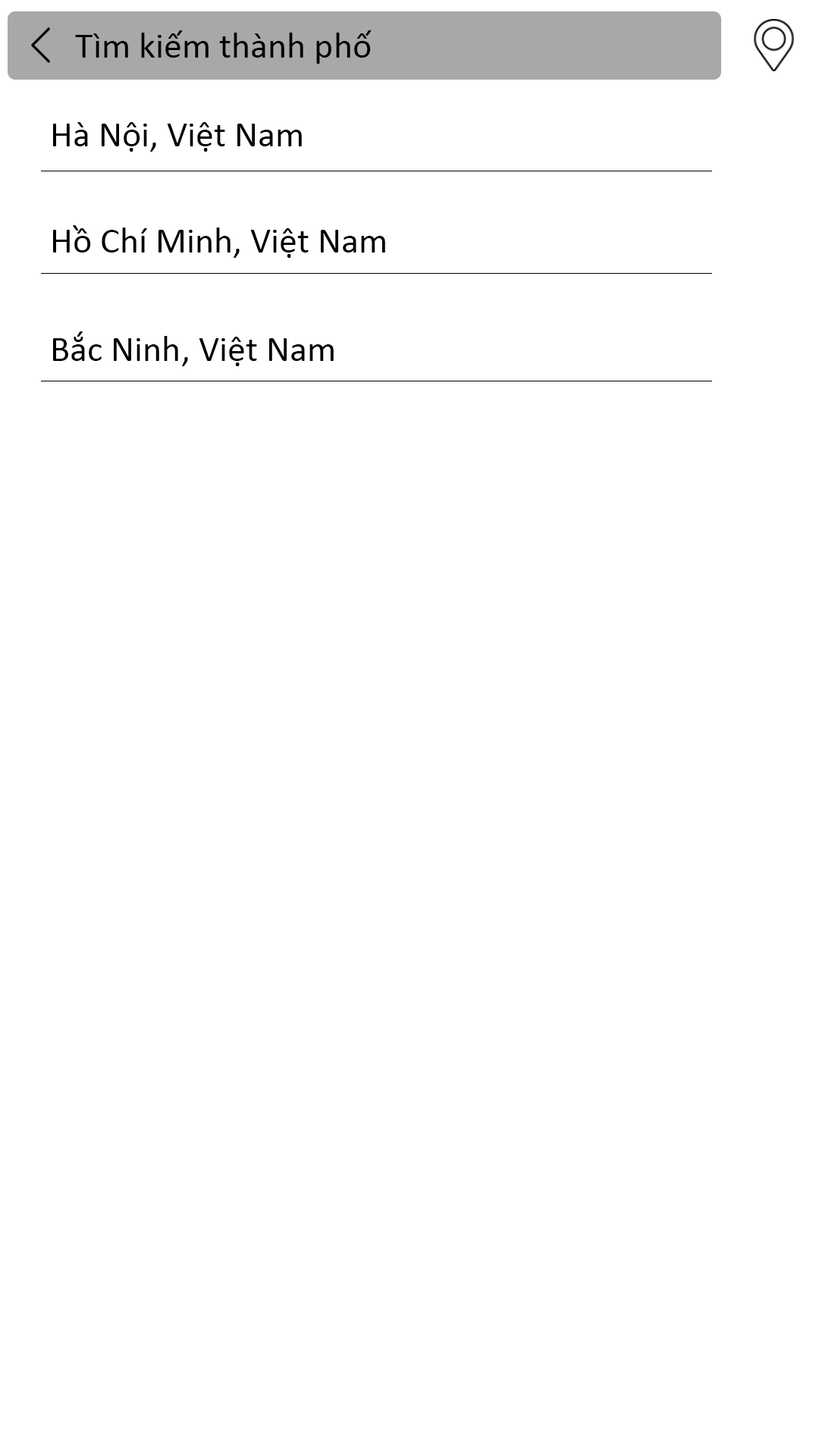
<style>
.page{position:relative;width:819px;height:1456px;background:#ffffff}
.page>*{position:absolute;margin:0}
.t1{font:36.4px "Calibri";color:#000000}
</style>
<div class="page">
<p class="t1" style="left:75px;top:30px;width:297px;height:34px">Tìm kiếm thành phố</p>
<p class="t1" style="left:53px;top:122px;width:249px;height:30px">Hà Nội, Việt Nam</p>
<p class="t1" style="left:53px;top:225px;width:332px;height:33px">Hồ Chí Minh, Việt Nam</p>
<p class="t1" style="left:53px;top:331px;width:281px;height:35px">Bắc Ninh, Việt Nam</p>
</div>
